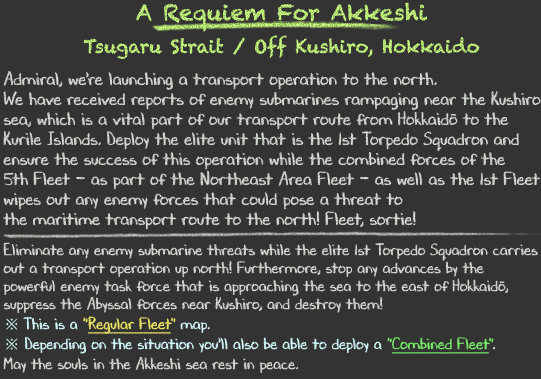
<style>
.page{position:relative;width:541px;height:379px;background:#333333}
.page>*{position:absolute;margin:0}
.t1{font:18px/36px "Chalkduster"}
.t2{font:22px/36px "Chalkduster"}
.t3{font:18px/20px "DJBChalkItUp";color:#d9ded6}
.t4{font:18px/16px "DJBChalkItUp";color:#d9ded6}
.t5{font:16px/18px "DJBChalkItUp";color:#d9ded6}
.t6{font:16px/20px "DJBChalkItUp";color:#d9ded6}
.t7{font:16px/20px "TimesNewRomanPSMT";color:#d7feff}
.t8{font:16px/20px "DJBChalkItUp";color:#d7feff}
.t9{font:16px/20px "DJBChalkItUp";color:#f5ed68}
.t10{font:16px/20px "DJBChalkItUp";color:#f5ed68;text-decoration:underline}
.t11{font:16px/20px "DJBChalkItUp";color:#7bf26b}
.t12{font:16px/20px "DJBChalkItUp";color:#7bf26b;text-decoration:underline}
</style>
<div class="page">
<p class="t1" style="left:83px;top:2px;width:397px;height:57px;text-align:center"><span class="t2">A Requiem For Akkeshi<br></span>Tsugaru Strait / Off Kushiro, Hokkaido</p>
<p class="t3" style="left:3px;top:71px;width:538px;height:302px">Admiral, we're launching a transport operation to the north.<br>We have received reports of enemy submarines rampaging near the Kushiro<br>sea, which is a vital part of our transport route from Hokkaidō to the<br>Kurile Islands. Deploy the elite unit that is the 1st Torpedo Squadron and <br>ensure the success of this operation while the combined forces of the<br>5th Fleet — as part of the Northeast Area Fleet — as well as the 1st Fleet<br>wipes out any enemy forces that could pose a threat to<br><span class="t4">the maritime transport route to the north! Fleet, sortie!<br><br></span><span class="t5">Eliminate any enemy submarine threats while the elite 1st Torpedo Squadron carries<br>out a transport operation up north! Furthermore, stop any advances by the<br>powerful enemy task force that is approaching the sea to the east of Hokkaidō,<br></span><span class="t6">suppress the Abyssal forces near Kushiro, and destroy them!<br></span><span class="t7">※ </span><span class="t8">This is a </span><span class="t9">"</span><span class="t10">Regular Fleet</span><span class="t9">"</span><span class="t8"> map.<br></span><span class="t7">※</span><span class="t8"> Depending on the situation you'll also be able to deploy a </span><span class="t11">"</span><span class="t12">Combined Fleet</span><span class="t11">"</span><span class="t8">.<br></span><span class="t6">May the souls in the Akkeshi sea rest in peace.</span></p>
</div>
